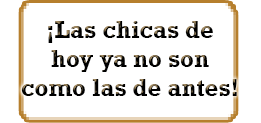
<style>
.page{position:relative;width:261px;height:123px;background:#ffffff}
.page>*{position:absolute;margin:0}
.t1{font:24px "Rockwell-Bold";color:#000000}
.t2{font:12px "Rockwell-Bold";color:#b79f45}
</style>
<div class="page">
<p class="t1" style="left:21px;top:21px;width:216px;height:75px;text-align:center"><span class="t2"><br></span>¡Las chicas de<br>hoy ya no son<br>como las de antes!</p>
</div>
